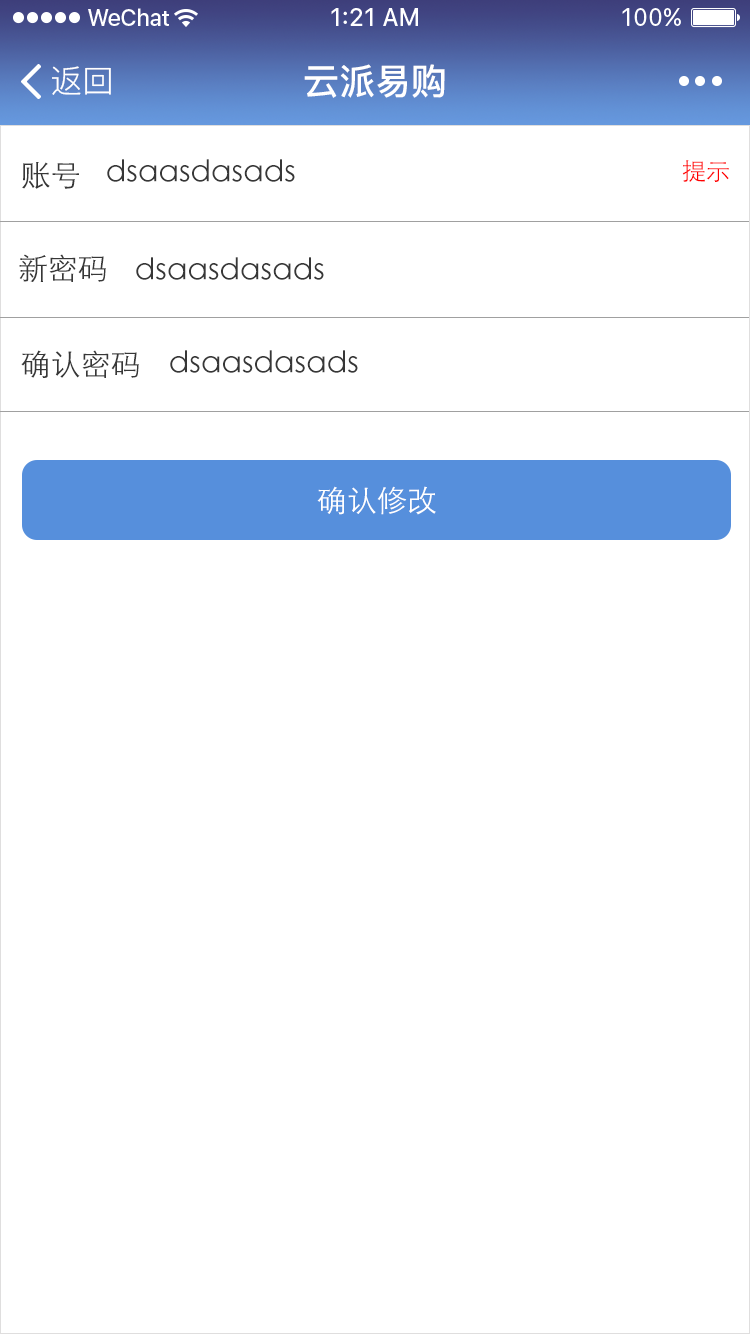
<style>
.page{position:relative;width:750px;height:1334px;background:#ffffff}
.page>*{position:absolute;margin:0}
.t1{font:36px "PingFang-SC-Bold";color:#ffffff}
.t2{font:32px "PingFang-SC-Regular";color:#ffffff}
.t3{font:30px "STXihei";color:#373737}
.t4{font:24px "STXihei";color:#ff0000}
.t5{font:30px "STXihei";color:#ffffff}
</style>
<div class="page">
<p class="t1" style="left:304px;top:64px;width:141px;height:34px">云派易购</p>
<p class="t2" style="left:52px;top:66px;width:59px;height:29px">返回</p>
<p class="t3" style="left:107px;top:159px;width:188px;height:23px">dsaasdasads</p>
<p class="t4" style="left:682px;top:160px;width:47px;height:22px">提示</p>
<p class="t3" style="left:22px;top:162px;width:57px;height:27px">账号</p>
<p class="t3" style="left:19px;top:254px;width:87px;height:28px">新密码</p>
<p class="t3" style="left:136px;top:257px;width:188px;height:23px">dsaasdasads</p>
<p class="t3" style="left:21px;top:350px;width:118px;height:28px">确认密码</p>
<p class="t3" style="left:170px;top:350px;width:188px;height:23px">dsaasdasads</p>
<p class="t5" style="left:317px;top:486px;width:119px;height:29px">确认修改</p>
</div>
